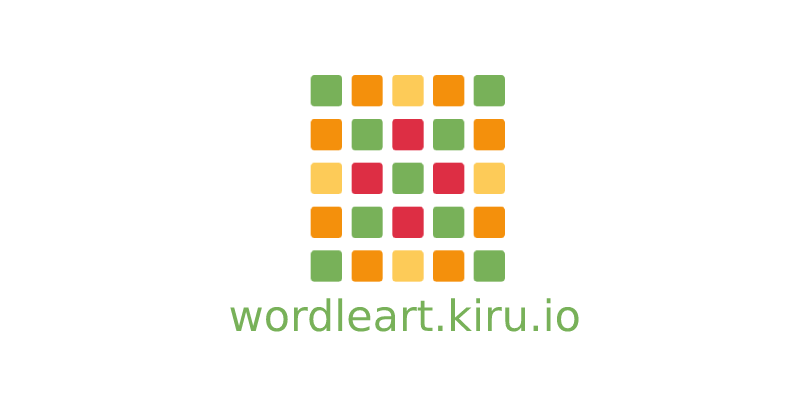
<style>
.page{position:relative;width:800px;height:418px;background:#ffffff}
.page>*{position:absolute;margin:0}
.t1{font:43px "DejaVuSans";color:#78b159}
</style>
<div class="page">
<p class="t1" style="left:230px;top:298px;width:349px;height:34px">wordleart.kiru.io</p>
</div>
